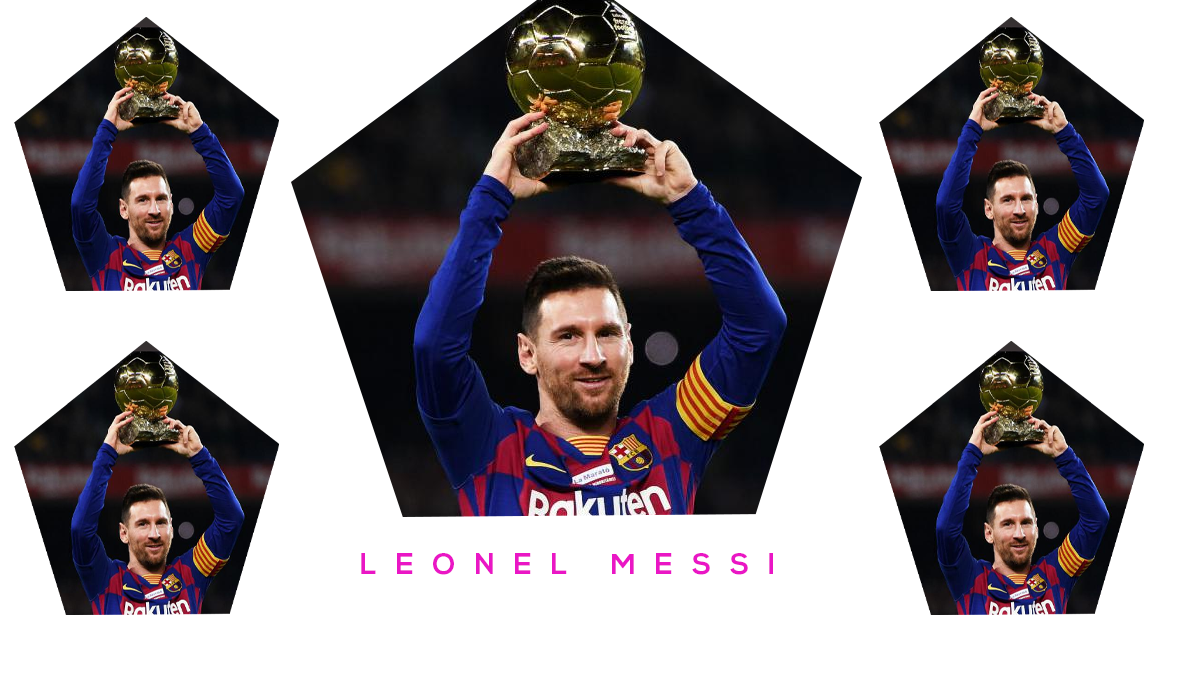
<style>
.page{position:relative;width:1200px;height:675px;background:#ffffff}
.page>*{position:absolute;margin:0}
.t1{font:50px "NexaBold";letter-spacing:0.64em;color:#ea16c5;text-transform:uppercase}
</style>
<div class="page">
<p class="t1" style="left:361px;top:553px;width:412px;height:22px">LEONEL MESSI</p>
</div>
